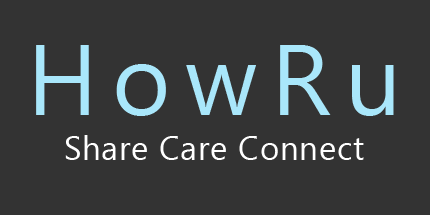
<style>
.page{position:relative;width:430px;height:215px;background:#333333}
.page>*{position:absolute;margin:0}
.t1{font:100px "LeelawadeeUI";letter-spacing:0.14em;color:#a9e7fb}
.t2{font:33.3px "LeelawadeeUI";letter-spacing:0.02em;color:#ffffff}
</style>
<div class="page">
<p class="t1" style="left:36px;top:45px;width:358px;height:71px">HowRu</p>
<p class="t2" style="left:65px;top:135px;width:299px;height:25px">Share Care Connect</p>
</div>
